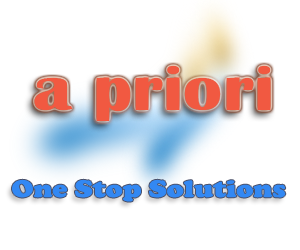
<style>
.page{position:relative;width:300px;height:250px;background:#ffffff}
.page>*{position:absolute;margin:0}
.t1{font:64px "BritannicBold";color:#f15941;scale:1.13 1}
.t2{font:25px "CooperBlack";color:#3288f3;scale:1.13 1}
</style>
<div class="page">
<p class="t1" style="left:34px;top:66px;width:237px;height:55px">a priori</p>
<p class="t2" style="left:12px;top:179px;width:274px;height:23px">One Stop Solutions</p>
</div>
